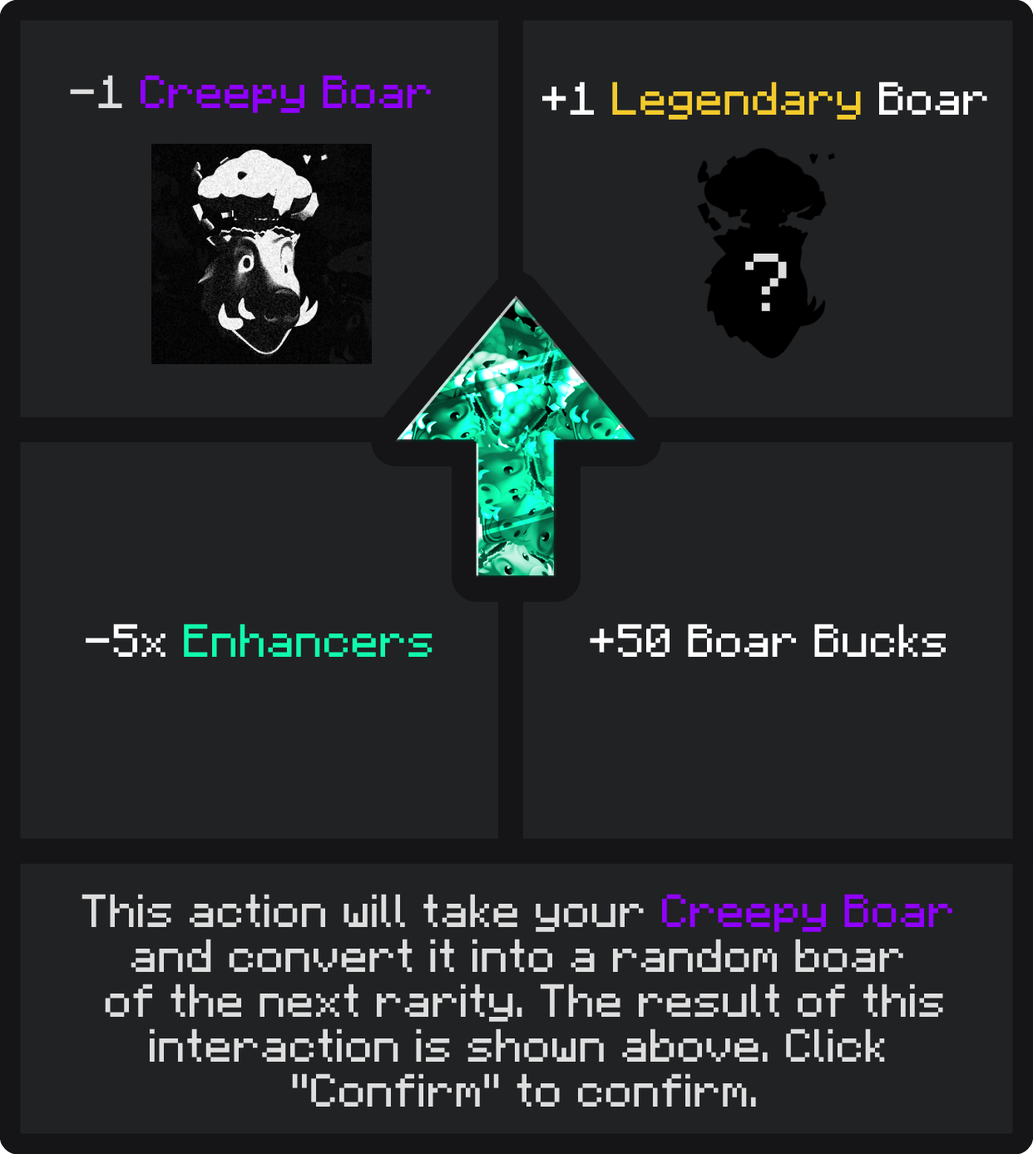
<style>
.page{position:relative;width:1033px;height:1154px;background:#212224}
.page>*{position:absolute;margin:0}
.t1{font:37.4px "F77-Minecraft";color:#9000ff}
.t2{font:37.4px "F77-Minecraft";color:#dedede}
.t3{font:37.4px "F77-Minecraft";color:#f3cb2c}
.t4{font:37.4px "F77-Minecraft";color:#ffffff}
.t5{font:37.4px "F77-Minecraft";color:#10fcad}
</style>
<div class="page">
<p class="t1" style="left:70px;top:75px;width:361px;height:38px"><span class="t2">-1 </span>Creepy Boar</p>
<p class="t3" style="left:542px;top:82px;width:445px;height:38px"><span class="t4">+1 </span>Legendary <span class="t4">Boar</span></p>
<p class="t5" style="left:86px;top:624px;width:346px;height:33px"><span class="t4">-5x </span>Enhancers</p>
<p class="t4" style="left:590px;top:624px;width:356px;height:33px">+50 Boar Bucks</p>
<p class="t2" style="left:82px;top:894px;width:870px;height:213px;text-align:center">This action will take your <span class="t1">Creepy Boar <br></span>and convert it into a random boar <br>of the next rarity. The result of this<br>interaction is shown above. Click <br>"Confirm" to confirm.</p>
</div>
